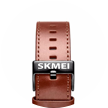
<style>
.page{position:relative;width:108px;height:108px;background:#fefefe}
.page>*{position:absolute;margin:0}
.t1{font:8.1px "MyriadPro-Bold";color:#ffffff;scale:1.43 1}
</style>
<div class="page">
<p class="t1" style="left:38px;top:63px;width:32px;height:6px">SKMEI</p>
</div>
